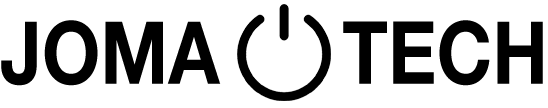
<style>
.page{position:relative;width:548px;height:108px;background:#ffffff}
.page>*{position:absolute;margin:0}
.t1{font:87px "HelveticaNeue-Bold";color:#000000;scale:0.86 1}
</style>
<div class="page">
<p class="t1" style="left:1px;top:20px;width:220px;height:66px">JOMA</p>
<p class="t1" style="left:343px;top:20px;width:200px;height:66px">TECH</p>
</div>
